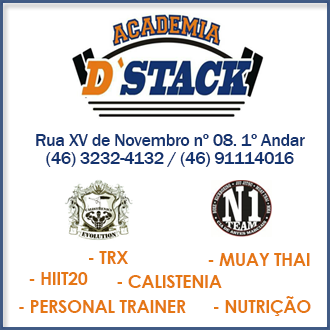
<style>
.page{position:relative;width:330px;height:330px;background:#ffffff}
.page>*{position:absolute;margin:0}
.t1{font:18px/18px "FranklinGothic-Medium";letter-spacing:-0.025em;color:#13336f}
.t2{font:18px "CenturyGothic-Bold";letter-spacing:-0.025em;color:#e57715}
</style>
<div class="page">
<p class="t1" style="left:36px;top:134px;width:269px;height:33px;text-align:center">Rua XV de Novembro nº 08. 1º Andar<br>(46) 3232-4132 / (46) 91114016</p>
<p class="t2" style="left:89px;top:251px;width:39px;height:13px">- TRX</p>
<p class="t2" style="left:208px;top:253px;width:102px;height:13px">- MUAY THAI</p>
<p class="t2" style="left:29px;top:272px;width:59px;height:13px">- HIIT20</p>
<p class="t2" style="left:117px;top:275px;width:105px;height:13px">- CALISTENIA</p>
<p class="t2" style="left:19px;top:300px;width:167px;height:13px">- PERSONAL TRAINER</p>
<p class="t2" style="left:214px;top:296px;width:97px;height:20px">- NUTRIÇÃO</p>
</div>
